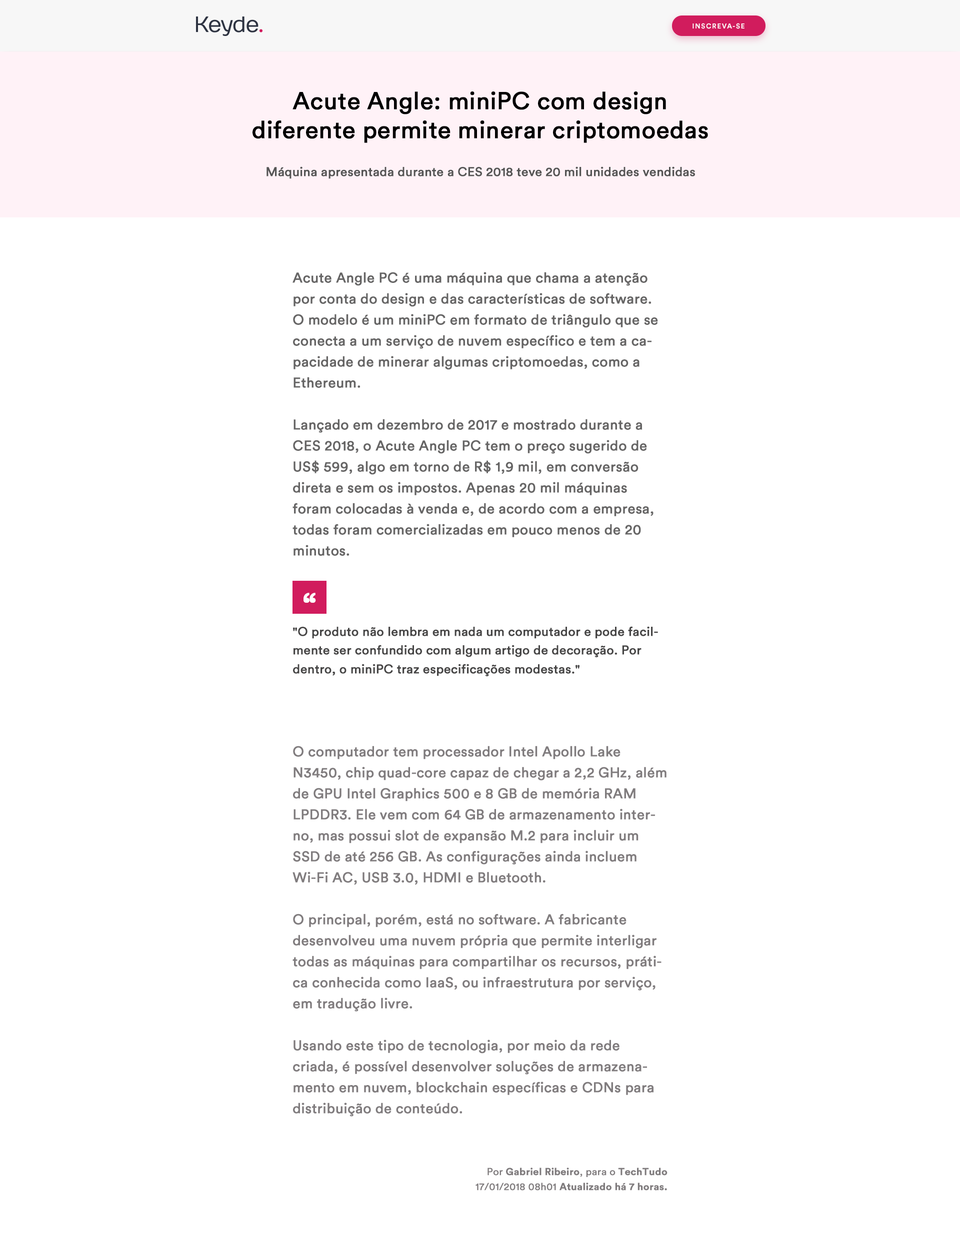
<style>
.page{position:relative;width:960px;height:1242px;background:#ffffff}
.page>*{position:absolute;margin:0}
.t1{font:7px "CircularStd-Bold";letter-spacing:0.1em;color:#ffffff}
.t2{font:24px/29px "CircularStd-Book";color:#000000;font-weight:bold}
.t3{font:12.5px "CircularStd-Book";color:#555555;font-weight:bold}
.t4{font:14px/21px "CircularStd-Book";color:#666565;font-weight:bold}
.t5{font:36px "CircularStd-Book";color:#ffffff;font-weight:bold}
.t6{font:12.5px/18.7px "CircularStd-Book";color:#474646;font-weight:bold}
.t7{font:14px/21px "CircularStd-Book";color:#807c7e;font-weight:bold}
.t8{font:10px/15px "CircularStd-Bold";color:#807c7e;font-weight:bold}
.t9{font:10px/15px "CircularStd-Book";color:#807c7e;font-weight:bold}
</style>
<div class="page">
<p class="t1" style="left:692px;top:23px;width:52px;height:6px">INSCREVA-SE</p>
<p class="t2" style="left:252px;top:91px;width:456px;height:52px;text-align:center">Acute Angle: miniPC com design <br>diferente permite minerar criptomoedas</p>
<p class="t3" style="left:266px;top:166px;width:429px;height:13px">Máquina apresentada durante a CES 2018 teve 20 mil unidades vendidas</p>
<p class="t4" style="left:292px;top:272px;width:366px;height:284px">Acute Angle PC é uma máquina que chama a atenção por conta do design e das características de software. O modelo é um miniPC em formato de triângulo que se conecta a um serviço de nuvem específico e tem a capacidade de minerar algumas criptomoedas, como a Ethereum.<br><br>Lançado em dezembro de 2017 e mostrado durante a CES 2018, o Acute Angle PC tem o preço sugerido de US$ 599, algo em torno de R$ 1,9 mil, em conversão direta e sem os impostos. Apenas 20 mil máquinas foram colocadas à venda e, de acordo com a empresa, todas foram comercializadas em pouco menos de 20 minutos.</p>
<p class="t5" style="left:303px;top:593px;width:13px;height:10px">“</p>
<p class="t6" style="left:293px;top:626px;width:365px;height:50px">"O produto não lembra em nada um computador e pode facilmente ser confundido com algum artigo de decoração. Por dentro, o miniPC traz especificações modestas."</p>
<p class="t7" style="left:292px;top:746px;width:374px;height:371px">O computador tem processador Intel Apollo Lake N3450, chip quad-core capaz de chegar a 2,2 GHz, além de GPU Intel Graphics 500 e 8 GB de memória RAM LPDDR3. Ele vem com 64 GB de armazenamento interno, mas possui slot de expansão M.2 para incluir um SSD de até 256 GB. As configurações ainda incluem Wi-Fi AC, USB 3.0, HDMI e Bluetooth.<br><br>O principal, porém, está no software. A fabricante desenvolveu uma nuvem própria que permite interligar todas as máquinas para compartilhar os recursos, prática conhecida como IaaS, ou infraestrutura por serviço, em tradução livre.<br><br>Usando este tipo de tecnologia, por meio da rede criada, é possível desenvolver soluções de armazenamento em nuvem, blockchain específicas e CDNs para distribuição de conteúdo.</p>
<p class="t8" style="left:475px;top:1168px;width:192px;height:23px;text-align:right"><span class="t9">Por </span>Gabriel Ribeiro<span class="t9">, para o </span>TechTudo<br><span class="t9">17/01/2018 08h01 </span>Atualizado há 7 horas.</p>
</div>
